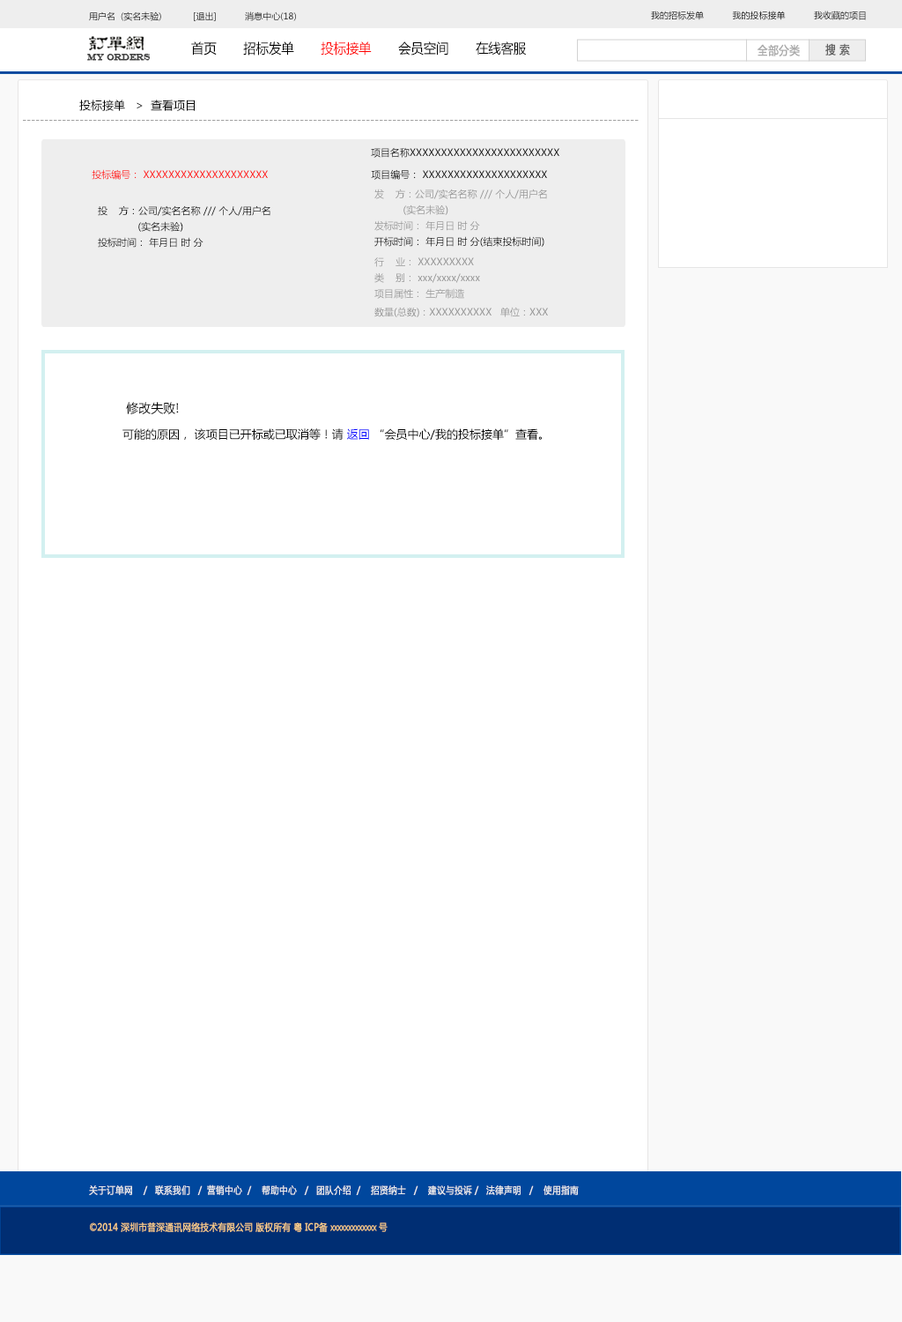
<style>
.page{position:relative;width:902px;height:1322px;background:#ffffff}
.page>*{position:absolute;margin:0}
.t1{font:8.8px "MicrosoftYaHei";color:#000000}
.t2{font:13.6px "MicrosoftYaHei";color:#000000;font-variant:small-caps;scale:0.94 1}
.t3{font:13.6px "MicrosoftYaHei";color:#ff0000;font-variant:small-caps;scale:0.94 1}
.t4{font:8.7px "EngraversMT";color:#434343;font-variant:small-caps;font-weight:bold;scale:0.86 1}
.t5{font:11.6px "MicrosoftYaHei";color:#aaaaaa;font-variant:small-caps;font-weight:bold;scale:0.86 1}
.t6{font:11.6px "MicrosoftYaHei";color:#626262;font-variant:small-caps;font-weight:bold;scale:0.86 1}
.t7{font:11.5px "MicrosoftYaHei";color:#000000}
.t8{font:10.6px "MicrosoftYaHei";color:#a0a0a0}
.t9{font:9.7px "MicrosoftYaHei";color:#000000}
.t10{font:9.7px "MicrosoftYaHei";color:#ff0000}
.t11{font:9.7px/15.9px "MicrosoftYaHei";color:#959595}
.t12{font:9.7px/15.9px "MicrosoftYaHei";color:#000000}
.t13{font:9.7px "MicrosoftYaHei";color:#959595}
.t14{font:11.5px/26.4px "MicrosoftYaHei";color:#000000}
.t15{font:12.3px/26.4px "MicrosoftYaHei";color:#000000}
.t16{font:11.5px/26.4px "MicrosoftYaHei";color:#0000ff}
.t17{font:9.7px "MicrosoftYaHei";color:#eeeeee;font-variant:small-caps;font-weight:bold;scale:0.86 1}
.t18{font:13.6px "STXihei";color:#eeeeee;font-variant:small-caps;font-weight:bold;scale:0.86 1}
.t19{font:9.7px "MicrosoftYaHei";color:#facd89;font-variant:small-caps;font-weight:bold;scale:0.87 1}
.t20{font:9.7px "MicrosoftYaHei";color:#eeeeee;font-variant:small-caps;font-weight:bold;scale:0.87 1}
</style>
<div class="page">
<p class="t1" style="left:89px;top:11px;width:207px;height:10px">用户名  (实名未验)            [退出]           消息中心(18)</p>
<p class="t1" style="left:651px;top:11px;width:215px;height:9px">我的招标发单           我的投标接单           我收藏的项目</p>
<p class="t2" style="left:191px;top:41px;width:336px;height:15px">首页       招标发单       <span class="t3">投标接单</span>       会员空间       在线客服</p>
<p class="t4" style="left:87px;top:54px;width:64px;height:7px">MY ORDERS</p>
<p class="t5" style="left:758px;top:44px;width:42px;height:12px">全部分类</p>
<p class="t6" style="left:826px;top:43px;width:24px;height:13px">搜 索</p>
<p class="t7" style="left:79px;top:100px;width:116px;height:11px">投标接单   &gt;  查看项目</p>
<p class="t8" style="left:23px;top:120px;width:616px;height:1px">--------------------------------------------------------------------------------------------------------------------------------------------</p>
<p class="t9" style="left:371px;top:147px;width:188px;height:11px">项目名称XXXXXXXXXXXXXXXXXXXXXXXX</p>
<p class="t9" style="left:371px;top:147px;width:188px;height:11px">项目名称XXXXXXXXXXXXXXXXXXXXXXXX</p>
<p class="t10" style="left:92px;top:169px;width:176px;height:11px">投标编号： XXXXXXXXXXXXXXXXXXXX</p>
<p class="t10" style="left:92px;top:169px;width:176px;height:11px">投标编号： XXXXXXXXXXXXXXXXXXXX</p>
<p class="t9" style="left:371px;top:169px;width:176px;height:11px">项目编号： XXXXXXXXXXXXXXXXXXXX</p>
<p class="t9" style="left:371px;top:169px;width:176px;height:11px">项目编号： XXXXXXXXXXXXXXXXXXXX</p>
<p class="t11" style="left:374px;top:189px;width:173px;height:58px">发    方：公司/实名名称 /// 个人/用户名<br>          (实名未验)<br>发标时间： 年月日 时 分          <br><span class="t12">开标时间： 年月日 时 分(结束投标时间)</span></p>
<p class="t11" style="left:374px;top:189px;width:173px;height:58px">发    方：公司/实名名称 /// 个人/用户名<br>          (实名未验)<br>发标时间： 年月日 时 分          <br><span class="t12">开标时间： 年月日 时 分(结束投标时间)</span></p>
<p class="t12" style="left:98px;top:205px;width:172px;height:43px">投    方：公司/实名名称 /// 个人/用户名<br>          (实名未验)<br>投标时间： 年月日 时 分</p>
<p class="t12" style="left:98px;top:205px;width:172px;height:43px">投    方：公司/实名名称 /// 个人/用户名<br>              (实名未验)<br>投标时间： 年月日 时 分</p>
<p class="t11" style="left:374px;top:257px;width:106px;height:42px">行    业： XXXXXXXXX<br>类    别： xxx/xxxx/xxxx<br>项目属性： 生产制造</p>
<p class="t11" style="left:374px;top:257px;width:106px;height:42px">行    业： XXXXXXXXX<br>类    别： xxx/xxxx/xxxx<br>项目属性： 生产制造</p>
<p class="t13" style="left:374px;top:307px;width:174px;height:10px">数量(总数)：XXXXXXXXXX   单位：XXX</p>
<p class="t13" style="left:374px;top:307px;width:174px;height:10px">数量(总数)：XXXXXXXXXX   单位：XXX</p>
<p class="t14" style="left:122px;top:402px;width:420px;height:39px"><span class="t15"> 修改失败! <br></span>可能的原因， 该项目已开标或已取消等！请 <span class="t16">返回 </span>“会员中心/我的投标接单”查看。</p>
<p class="t17" style="left:89px;top:1184px;width:490px;height:11px"><span class="t18"><br><br></span>关于订单网    /   联系我们   /  营销中心  /    帮助中心   /   团队介绍  /    招贤纳士   /    建议与投诉 /   法律声明   /    使用指南</p>
<p class="t19" style="left:90px;top:1222px;width:298px;height:10px"><span class="t20"> </span>©2014 深圳市普深通讯网络技术有限公司 版权所有 粤 ICP备 xxxxxxxxxxxxx 号</p>
</div>
